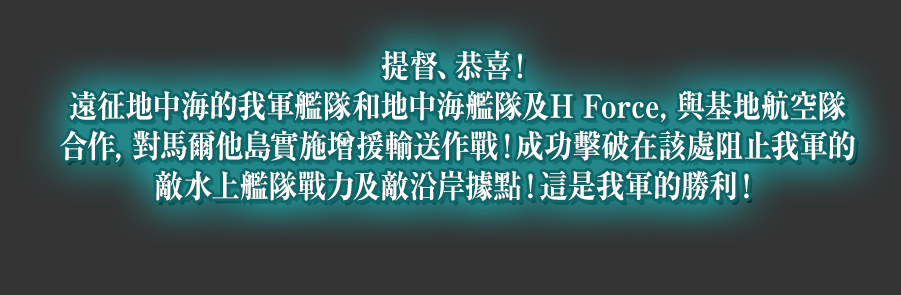
<style>
.page{position:relative;width:901px;height:295px;background:#333333}
.page>*{position:absolute;margin:0}
.t1{font:32px/40px "RyuminPro-ExBold";color:#ffffff;scale:0.9 1}
</style>
<div class="page">
<p class="t1" style="left:60px;top:50px;width:795px;height:151px;text-align:center">提督、恭喜！<br>遠征地中海的我軍艦隊和地中海艦隊及H Force，與基地航空隊<br>合作，對馬爾他島實施增援輸送作戰！成功擊破在該處阻止我軍的<br>敵水上艦隊戰力及敵沿岸據點！這是我軍的勝利！</p>
</div>
